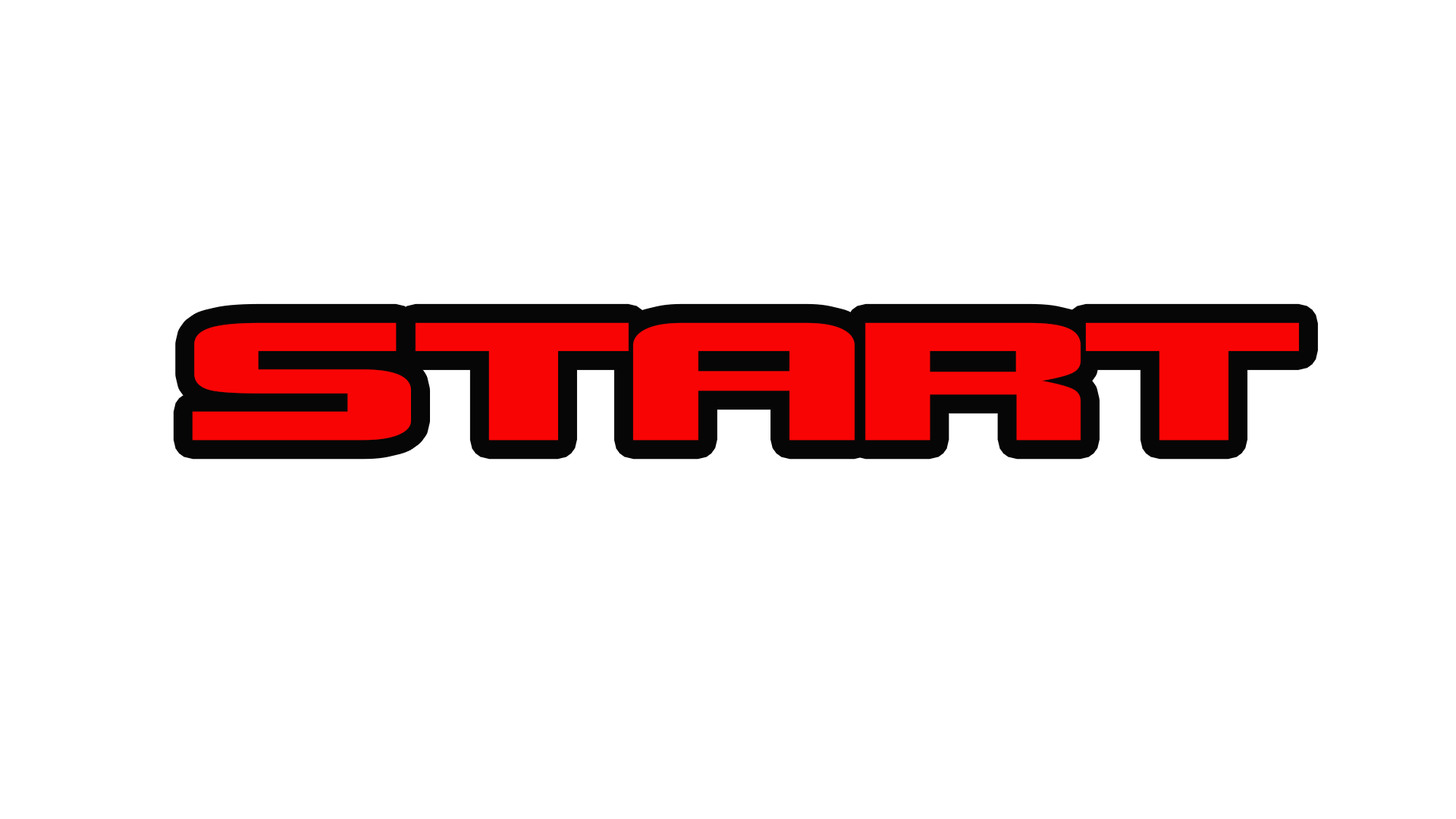
<style>
.page{position:relative;width:1456px;height:819px;background:#ffffff}
.page>*{position:absolute;margin:0}
.t1{font:163px "DFSoGei-W9-WING-RKSJ-H";color:#f90404;scale:1.88 1}
</style>
<div class="page">
<p class="t1" style="left:192px;top:322px;width:1107px;height:119px">START</p>
</div>
